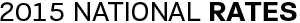
<style>
.page{position:relative;width:300px;height:23px;background:#ffffff}
.page>*{position:absolute;margin:0}
.t1{font:28px "PFEncoreSansPro-Regular";letter-spacing:-0.005em;color:#000000}
.t2{font:28px "PFEncoreSansPro-Bold";letter-spacing:-0.005em;color:#000000}
</style>
<div class="page">
<p class="t1" style="left:0px;top:2px;width:297px;height:19px">2015 NATIONAL <span class="t2">RATES</span></p>
</div>
